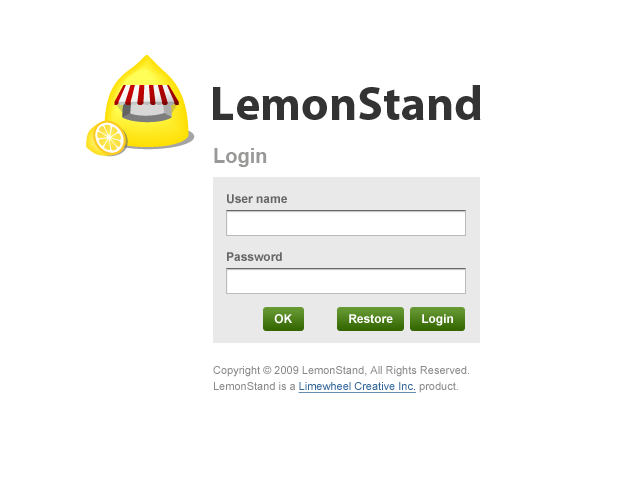
<style>
.page{position:relative;width:640px;height:480px;background:#ffffff}
.page>*{position:absolute;margin:0}
.t1{font:48px "MyriadPro-Bold";color:#333333}
.t2{font:20px "Arial-BoldMT";color:#999998}
.t3{font:12px "Arial-BoldMT";color:#666666}
.t4{font:12px "Arial-BoldMT";color:#ffffff}
.t5{font:11px/16px "ArialMT";color:#898989}
.t6{font:11px/16px "ArialMT";color:#336699;text-decoration:underline}
</style>
<div class="page">
<p class="t1" style="left:213px;top:85px;width:268px;height:35px">LemonStand</p>
<p class="t2" style="left:214px;top:148px;width:53px;height:19px">Login</p>
<p class="t3" style="left:227px;top:194px;width:60px;height:10px">User name</p>
<p class="t3" style="left:227px;top:252px;width:55px;height:9px">Password</p>
<p class="t4" style="left:274px;top:314px;width:18px;height:10px">OK</p>
<p class="t4" style="left:349px;top:314px;width:44px;height:9px">Restore</p>
<p class="t4" style="left:422px;top:314px;width:31px;height:12px">Login</p>
<p class="t5" style="left:213px;top:366px;width:256px;height:27px">Copyright © 2009 LemonStand, All Rights Reserved.<br>LemonStand is a <span class="t6">Limewheel Creative Inc.</span> product.</p>
</div>
